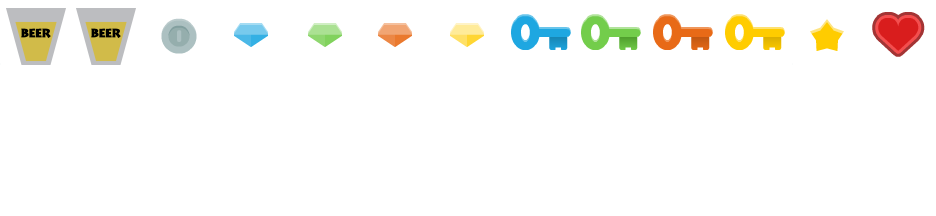
<style>
.page{position:relative;width:936px;height:216px;background:#ffffff}
.page>*{position:absolute;margin:0}
.t1{font:12px "AustereBlackCapsSSK";color:#000000;font-weight:bold}
</style>
<div class="page">
<p class="t1" style="left:21px;top:28px;width:30px;height:10px">BEER</p>
<p class="t1" style="left:91px;top:28px;width:30px;height:10px">BEER</p>
</div>
